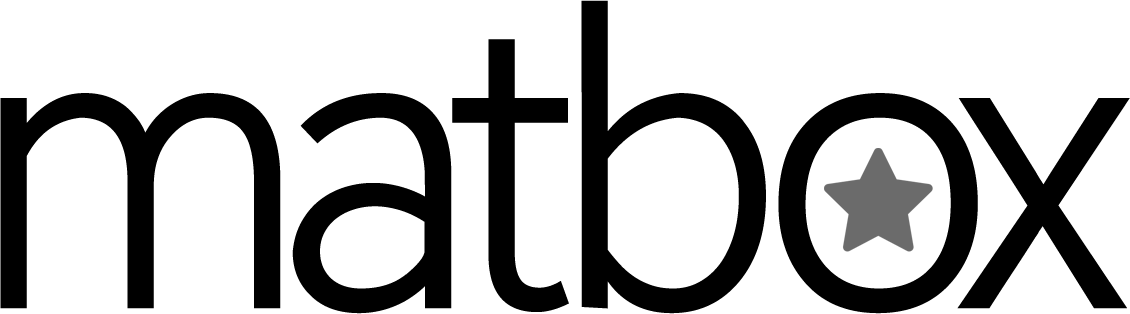
<style>
.page{position:relative;width:1130px;height:314px;background:#ffffff}
.page>*{position:absolute;margin:0}
.t1{font:420px "Homizio";letter-spacing:-0.03em;color:#000000}
.t2{font:420px "Homizio";color:#000000}
.t3{font:420px "Homizio";letter-spacing:-0.09em;color:#000000}
</style>
<div class="page">
<p class="t1" style="left:0px;top:0px;width:1130px;height:314px">ma<span class="t2">tb</span><span class="t3">o</span><span class="t2">x</span></p>
</div>
